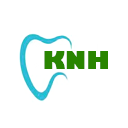
<style>
.page{position:relative;width:128px;height:128px;background:#ffffff}
.page>*{position:absolute;margin:0}
.t1{font:24px "GillSans-UltraBold";color:#298500}
</style>
<div class="page">
<p class="t1" style="left:44px;top:51px;width:64px;height:18px">KNH</p>
</div>
